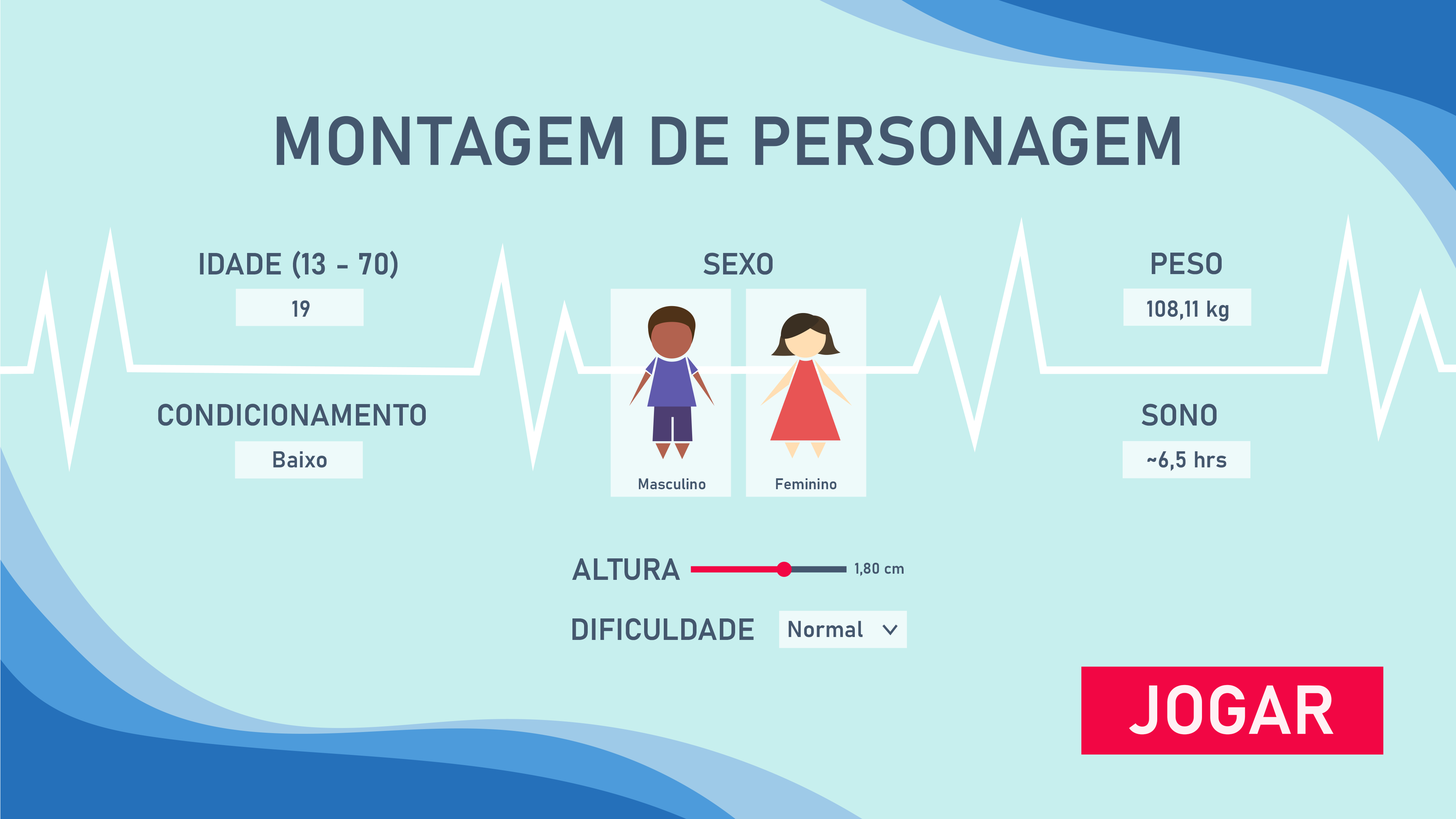
<style>
.page{position:relative;width:1456px;height:819px;background:#c7efee}
.page>*{position:absolute;margin:0}
.t1{font:68.2px "Bahnschrift-SemiBold";color:#44576f}
.t2{font:30.3px "Bahnschrift-SemiBold";color:#44576f}
.t3{font:22.7px "Bahnschrift-SemiBold";color:#44576f}
.t4{font:15.2px "Bahnschrift-SemiBold";color:#44576f}
.t5{font:68.2px "Bahnschrift-SemiBold";color:#fff0f5}
</style>
<div class="page">
<p class="t1" style="left:277px;top:116px;width:903px;height:50px">MONTAGEM DE PERSONAGEM</p>
<p class="t2" style="left:200px;top:250px;width:198px;height:29px">IDADE (13 - 70)</p>
<p class="t2" style="left:704px;top:253px;width:69px;height:22px">SEXO</p>
<p class="t2" style="left:1152px;top:252px;width:70px;height:22px">PESO</p>
<p class="t3" style="left:292px;top:300px;width:18px;height:17px">19</p>
<p class="t3" style="left:1147px;top:300px;width:82px;height:21px">108,11 kg</p>
<p class="t2" style="left:158px;top:404px;width:268px;height:22px">CONDICIONAMENTO</p>
<p class="t2" style="left:1142px;top:404px;width:75px;height:22px">SONO</p>
<p class="t3" style="left:273px;top:451px;width:54px;height:17px">Baixo</p>
<p class="t3" style="left:1148px;top:451px;width:79px;height:20px">~6,5 hrs</p>
<p class="t4" style="left:639px;top:478px;width:67px;height:12px">Masculino</p>
<p class="t4" style="left:776px;top:478px;width:61px;height:12px">Feminino</p>
<p class="t2" style="left:572px;top:558px;width:108px;height:22px">ALTURA</p>
<p class="t4" style="left:855px;top:563px;width:49px;height:13px">1,80 cm</p>
<p class="t2" style="left:572px;top:618px;width:182px;height:22px">DIFICULDADE</p>
<p class="t3" style="left:789px;top:621px;width:74px;height:16px">Normal</p>
<p class="t5" style="left:1129px;top:685px;width:205px;height:49px">JOGAR</p>
</div>
